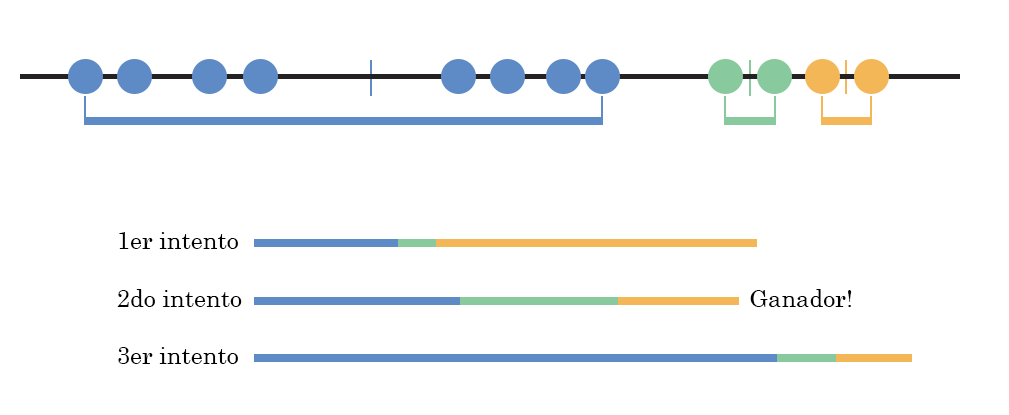
<style>
.page{position:relative;width:1009px;height:415px;background:#ffffff}
.page>*{position:absolute;margin:0}
.t1{font:24px "Century";color:#000000}
</style>
<div class="page">
<p class="t1" style="left:117px;top:232px;width:125px;height:132px">1er intento<br><br>2do intento<br><br>3er intento</p>
<p class="t1" style="left:750px;top:289px;width:102px;height:18px">Ganador!</p>
</div>
